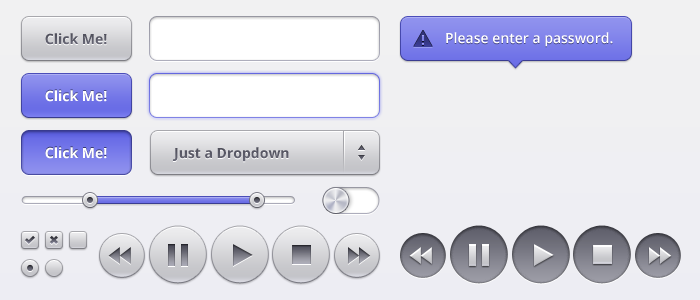
<style>
.page{position:relative;width:700px;height:300px}
.page>*{position:absolute;margin:0}
.t1{font:14px "OpenSans-Bold";color:#5b5b68}
.t2{font:14px "OpenSans-Semibold";color:#ffffff}
.t3{font:14px "OpenSans-Bold";color:#ffffff}
</style>
<div class="page">
<p class="t1" style="left:45px;top:33px;width:62px;height:12px">Click Me!</p>
<p class="t2" style="left:446px;top:32px;width:167px;height:15px">Please enter a password.</p>
<p class="t3" style="left:45px;top:90px;width:62px;height:12px">Click Me!</p>
<p class="t3" style="left:45px;top:147px;width:62px;height:12px">Click Me!</p>
<p class="t1" style="left:173px;top:147px;width:116px;height:15px">Just a Dropdown</p>
</div>
